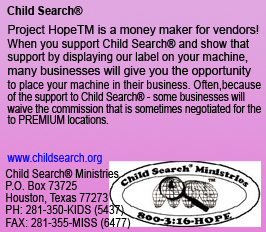
<style>
.page{position:relative;width:266px;height:232px}
.page>*{position:absolute;margin:0}
.t1{font:12px "Arial-BoldMT";color:#000000;scale:0.92 1}
.t2{font:12px "ArialMT";color:#000000}
.t3{font:12px "ArialMT";color:#000000;scale:0.94 1}
.t4{font:12px "ArialMT";color:#000000;scale:0.93 1}
.t5{font:12px "ArialMT";color:#000000;scale:0.87 1}
.t6{font:12px "ArialMT";color:#000000;scale:0.82 1}
.t7{font:12px "ArialMT";color:#0b0bf9;scale:0.86 1}
.t8{font:12px "ArialMT";color:#000000;scale:0.86 1}
</style>
<div class="page">
<p class="t1" style="left:7px;top:6px;width:76px;height:9px">Child Search®</p>
<p class="t2" style="left:8px;top:25px;width:251px;height:11px">Project HopeTM is a money maker for vendors!</p>
<p class="t3" style="left:7px;top:39px;width:242px;height:11px">When you support Child Search® and show that</p>
<p class="t4" style="left:7px;top:52px;width:241px;height:11px">support by displaying our label on your machine,</p>
<p class="t2" style="left:8px;top:66px;width:243px;height:11px">many businesses will give you the opportunity</p>
<p class="t5" style="left:7px;top:80px;width:254px;height:11px">to place your machine in their business. Often,because</p>
<p class="t6" style="left:7px;top:92px;width:238px;height:11px">of the support to Child Search® - some businesses will</p>
<p class="t6" style="left:7px;top:104px;width:254px;height:11px">waive the commission that is sometimes negotiated for the</p>
<p class="t6" style="left:7px;top:115px;width:101px;height:9px">to PREMIUM locations.</p>
<p class="t7" style="left:7px;top:153px;width:95px;height:11px">www.childsearch.org</p>
<p class="t8" style="left:5px;top:169px;width:114px;height:9px">Child Search® Ministries</p>
<p class="t8" style="left:6px;top:181px;width:71px;height:9px">P.O. Box 73725</p>
<p class="t8" style="left:6px;top:193px;width:102px;height:11px">Houston, Texas 77273</p>
<p class="t8" style="left:6px;top:205px;width:118px;height:11px">PH: 281-350-KIDS (5437)</p>
<p class="t8" style="left:6px;top:218px;width:125px;height:11px">FAX: 281-355-MISS (6477)</p>
</div>
